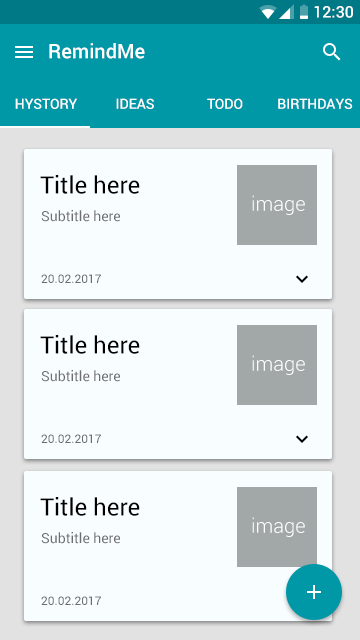
<style>
.page{position:relative;width:360px;height:640px;background:#f8feff}
.page>*{position:absolute;margin:0}
.t1{font:16px "Roboto-Medium";color:#ffffff}
.t2{font:20px "Roboto-Medium";color:#ffffff}
.t3{font:14px "Roboto-Medium";color:#ffffff}
.t4{font:24px "Roboto-Regular";color:#000000}
.t5{font:20px "Roboto-Light";color:#ffffff}
.t6{font:14px "Roboto-Regular";color:#6d6d6d}
.t7{font:12px "Roboto-Regular";color:#6d6d6d}
</style>
<div class="page">
<p class="t1" style="left:314px;top:6px;width:39px;height:12px">12:30</p>
<p class="t2" style="left:49px;top:43px;width:96px;height:16px">RemindMe</p>
<p class="t3" style="left:15px;top:98px;width:62px;height:11px">HYSTORY</p>
<p class="t3" style="left:116px;top:98px;width:38px;height:11px">IDEAS</p>
<p class="t3" style="left:207px;top:98px;width:36px;height:11px">TODO</p>
<p class="t3" style="left:278px;top:98px;width:75px;height:11px">BIRTHDAYS</p>
<p class="t4" style="left:40px;top:175px;width:100px;height:19px">Title here</p>
<p class="t5" style="left:252px;top:195px;width:53px;height:20px">image</p>
<p class="t6" style="left:41px;top:210px;width:79px;height:12px">Subtitle here</p>
<p class="t7" style="left:41px;top:274px;width:60px;height:9px">20.02.2017</p>
<p class="t4" style="left:40px;top:335px;width:100px;height:19px">Title here</p>
<p class="t5" style="left:252px;top:355px;width:53px;height:20px">image</p>
<p class="t6" style="left:41px;top:370px;width:79px;height:12px">Subtitle here</p>
<p class="t7" style="left:41px;top:434px;width:60px;height:9px">20.02.2017</p>
<p class="t4" style="left:40px;top:497px;width:100px;height:19px">Title here</p>
<p class="t5" style="left:252px;top:517px;width:53px;height:20px">image</p>
<p class="t6" style="left:41px;top:532px;width:79px;height:12px">Subtitle here</p>
<p class="t7" style="left:41px;top:596px;width:60px;height:9px">20.02.2017</p>
</div>
